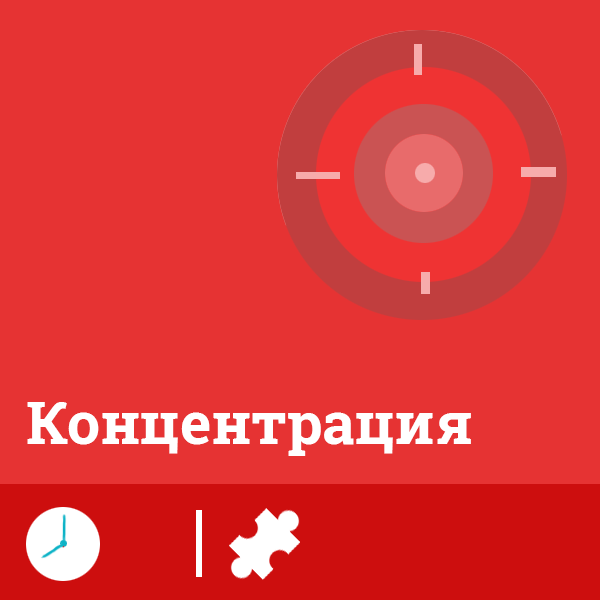
<style>
.page{position:relative;width:600px;height:600px;background:#e63333}
.page>*{position:absolute;margin:0}
.t1{font:58.5px "RobotoSlab-Bold";color:#ffffff}
</style>
<div class="page">
<p class="t1" style="left:27px;top:402px;width:444px;height:54px">Концентрация</p>
</div>
